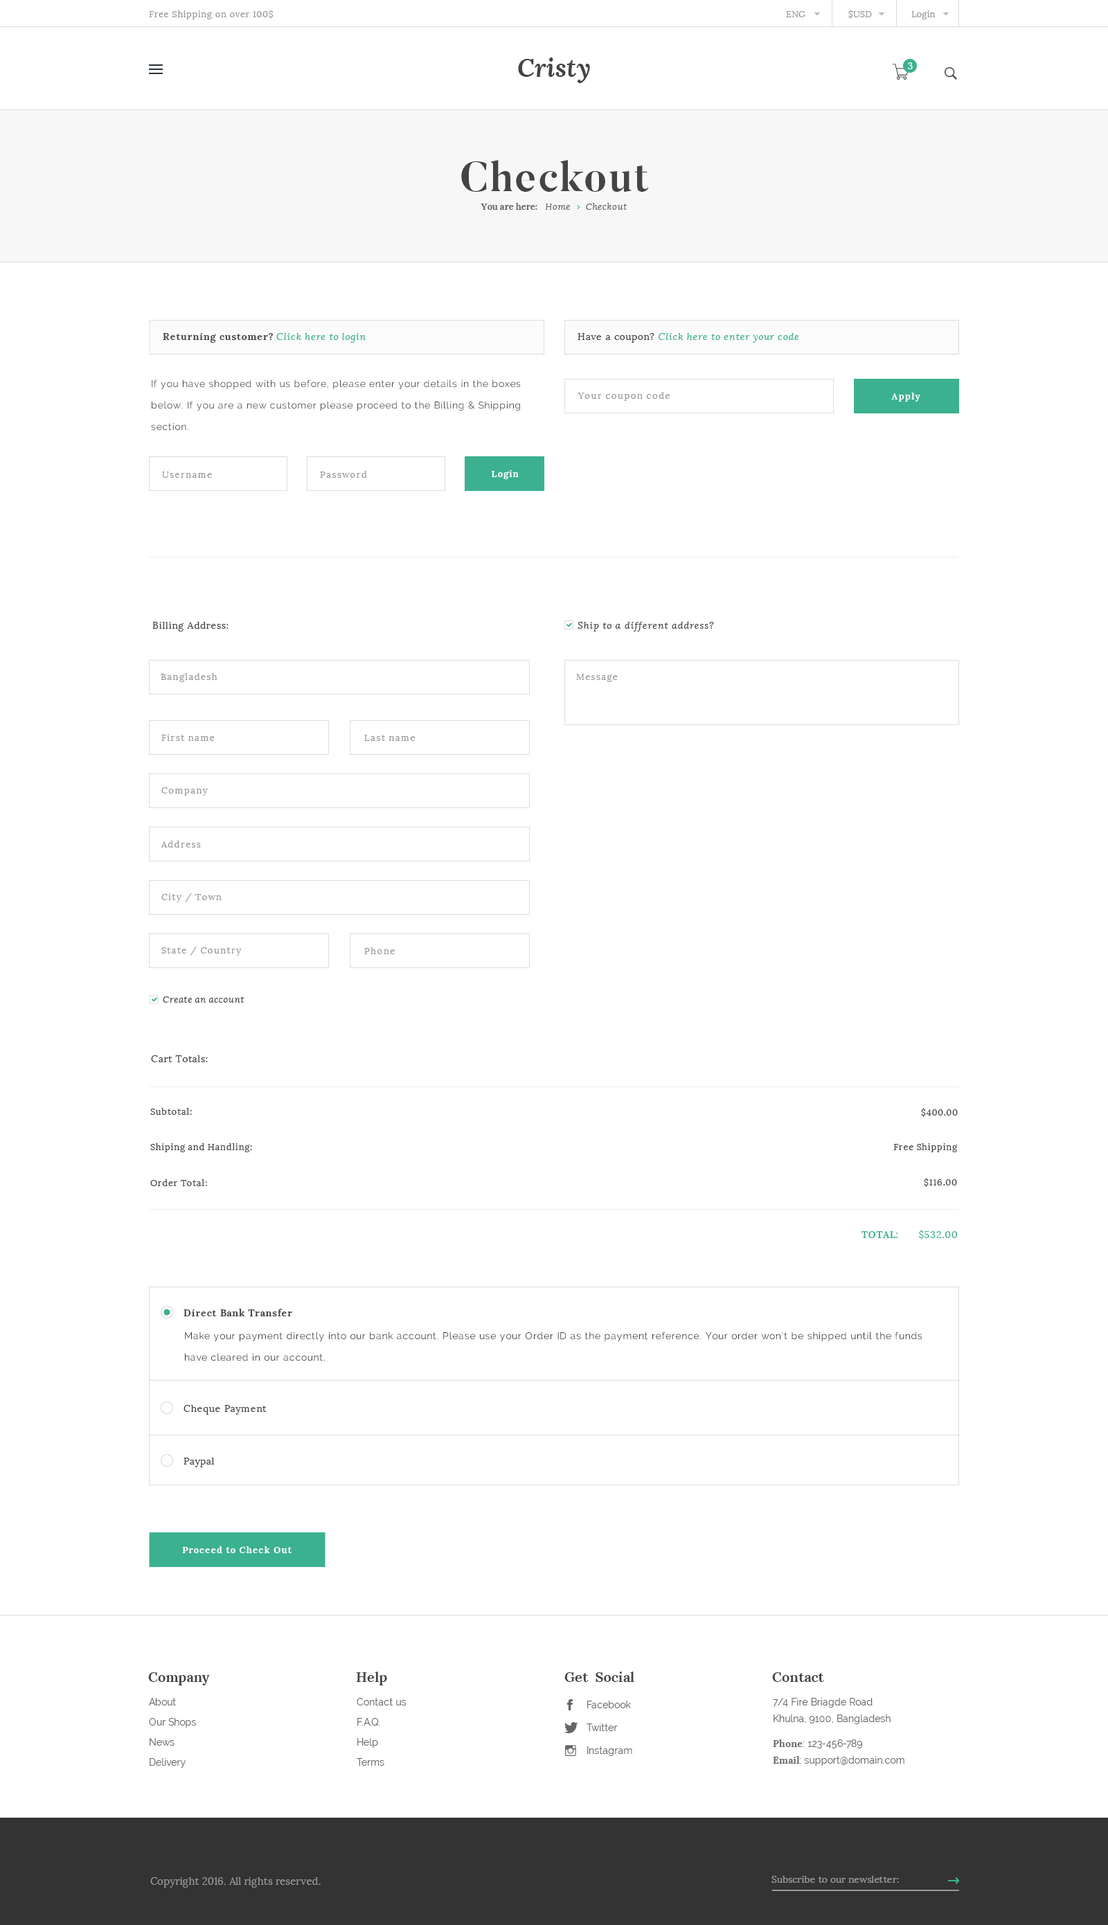
<style>
.page{position:relative;width:1108px;height:1925px;background:#ffffff}
.page>*{position:absolute;margin:0}
.t1{font:9px "Lora-Regular";letter-spacing:0.05em;color:#999999}
.t2{font:9px "Lora-Regular";letter-spacing:0.005em;color:#999999}
.t3{font:24.9px "Lora-BoldItalic";letter-spacing:0.01em;color:#444444}
.t4{font:9.7px "Lora-Regular";letter-spacing:0.1em;color:#ffffff}
.t5{font:41.5px "Butler-Bold";letter-spacing:0.05em;color:#444444}
.t6{font:9px "Lora-Italic";letter-spacing:0.05em;color:#666666}
.t7{font:9px "Lora-Bold";color:#666666}
.t8{font:9px "Lora-Bold";letter-spacing:0.05em;color:#666666}
.t9{font:9.7px "Lora-Bold";letter-spacing:0.05em;color:#444444}
.t10{font:9.7px "Lora-Italic";letter-spacing:0.05em;color:#3bb18f}
.t11{font:9.7px "Lora-Regular";letter-spacing:0.05em;color:#444444}
.t12{font:9.7px/21.3px "Raleway-Regular";letter-spacing:0.05em;color:#444444}
.t13{font:9px "Lora-Regular";letter-spacing:0.1em;color:#999999}
.t14{font:9px "Lora-Bold";letter-spacing:0.1em;color:#ffffff}
.t15{font:9.7px "Lora-Italic";letter-spacing:0.05em;color:#444444}
.t16{font:9px "Lora-Italic";letter-spacing:0.05em;color:#444444}
.t17{font:9px "Lora-Regular";letter-spacing:0.05em;color:#444444}
.t18{font:9.7px "Lora-Regular";letter-spacing:0.05em;color:#3bb18f}
.t19{font:9.7px "Lora-Bold";letter-spacing:0.05em;color:#3bb18f}
.t20{font:9.7px/21.3px "Raleway-Regular";letter-spacing:0.05em;color:#333333}
.t21{font:13.8px "Lora-Bold";letter-spacing:0.005em;color:#444444}
.t22{font:9.7px/20.1px "Raleway-Regular";letter-spacing:0.005em;color:#666666}
.t23{font:9.7px/16.6px "Raleway-Regular";letter-spacing:0.005em;color:#666666}
.t24{font:9.7px/12.5px "Lora-Bold";letter-spacing:0.005em;color:#666666}
.t25{font:9.7px/12.5px "Raleway-Regular";letter-spacing:0.005em;color:#666666}
.t26{font:9.7px/16.6px "Lora-Bold";letter-spacing:0.005em;color:#666666}
.t27{font:9.7px/22.8px "Raleway-Regular";letter-spacing:0.005em;color:#666666}
.t28{font:10.4px "Lora-Regular";letter-spacing:0.005em;color:#999999}
.t29{font:9.7px "Lora-Regular";letter-spacing:0.005em;color:#999999}
</style>
<div class="page">
<p class="t1" style="left:149px;top:10px;width:124px;height:9px">Free Shipping on over 100$</p>
<p class="t2" style="left:786px;top:11px;width:19px;height:6px">ENG</p>
<p class="t2" style="left:848px;top:10px;width:24px;height:9px">$USD</p>
<p class="t2" style="left:911px;top:10px;width:24px;height:9px">Login</p>
<p class="t3" style="left:518px;top:57px;width:72px;height:26px">Cristy</p>
<p class="t4" style="left:908px;top:62px;width:4px;height:7px">3</p>
<p class="t5" style="left:461px;top:160px;width:188px;height:32px">Checkout</p>
<p class="t6" style="left:480px;top:203px;width:147px;height:7px"><span class="t7">You are here</span><span class="t8">:   </span>Home      Checkout</p>
<p class="t9" style="left:163px;top:333px;width:203px;height:10px">Returning customer? <span class="t10">Click here to login</span></p>
<p class="t10" style="left:577px;top:333px;width:222px;height:10px"><span class="t11">Have a coupon? </span>Click here to enter your code</p>
<p class="t12" style="left:151px;top:379px;width:370px;height:52px">If you have shopped with us before, please enter your details in the boxes below. If you are a new customer please proceed to the Billing &amp; Shipping section.</p>
<p class="t13" style="left:577px;top:392px;width:93px;height:9px">Your coupon code</p>
<p class="t14" style="left:891px;top:393px;width:29px;height:9px">Apply</p>
<p class="t13" style="left:162px;top:471px;width:50px;height:7px">Username</p>
<p class="t13" style="left:320px;top:471px;width:47px;height:7px">Password</p>
<p class="t14" style="left:492px;top:470px;width:27px;height:9px">Login</p>
<p class="t11" style="left:152px;top:622px;width:76px;height:9px">Billing Address:</p>
<p class="t15" style="left:577px;top:622px;width:137px;height:9px">Ship to a different address?</p>
<p class="t13" style="left:161px;top:673px;width:56px;height:9px">Bangladesh</p>
<p class="t13" style="left:576px;top:674px;width:42px;height:8px">Message</p>
<p class="t13" style="left:161px;top:734px;width:54px;height:7px">First name</p>
<p class="t13" style="left:364px;top:735px;width:51px;height:6px">Last name</p>
<p class="t13" style="left:161px;top:787px;width:47px;height:8px">Company</p>
<p class="t13" style="left:161px;top:840px;width:40px;height:7px">Address</p>
<p class="t13" style="left:161px;top:893px;width:61px;height:9px">City / Town</p>
<p class="t13" style="left:161px;top:946px;width:81px;height:9px">State / Country</p>
<p class="t13" style="left:364px;top:947px;width:31px;height:7px">Phone</p>
<p class="t16" style="left:163px;top:996px;width:81px;height:6px">Create an account</p>
<p class="t11" style="left:151px;top:1055px;width:57px;height:7px">Cart Totals:</p>
<p class="t17" style="left:150px;top:1108px;width:42px;height:7px">Subtotal:</p>
<p class="t17" style="left:921px;top:1108px;width:36px;height:9px">$400.00</p>
<p class="t17" style="left:150px;top:1143px;width:102px;height:9px">Shiping and Handling:</p>
<p class="t17" style="left:893px;top:1143px;width:64px;height:9px">Free Shipping</p>
<p class="t17" style="left:150px;top:1179px;width:57px;height:7px">Order Total:</p>
<p class="t17" style="left:924px;top:1178px;width:33px;height:9px">$116.00</p>
<p class="t18" style="left:919px;top:1230px;width:38px;height:9px">$532.00</p>
<p class="t19" style="left:861px;top:1231px;width:37px;height:7px">TOTAL:</p>
<p class="t9" style="left:183px;top:1308px;width:109px;height:8px">Direct Bank Transfer</p>
<p class="t20" style="left:185px;top:1331px;width:737px;height:30px">Make your payment directly into our bank account. Please use your Order ID as the payment reference. Your order won’t be shipped until the funds have cleared in our account.</p>
<p class="t11" style="left:183px;top:1405px;width:84px;height:9px">Cheque Payment</p>
<p class="t11" style="left:183px;top:1457px;width:31px;height:10px">Paypal</p>
<p class="t14" style="left:182px;top:1546px;width:110px;height:7px">Proceed to Check Out</p>
<p class="t21" style="left:148px;top:1672px;width:62px;height:13px">Company</p>
<p class="t21" style="left:357px;top:1671px;width:30px;height:14px">Help</p>
<p class="t21" style="left:564px;top:1671px;width:70px;height:11px">Get  Social</p>
<p class="t21" style="left:772px;top:1672px;width:52px;height:10px">Contact</p>
<p class="t22" style="left:149px;top:1698px;width:47px;height:69px">About<br>Our Shops<br>News<br>Delivery<br>Returns</p>
<p class="t22" style="left:357px;top:1698px;width:49px;height:67px">Contact us<br>F.A.Q.<br>Help<br>Terms</p>
<p class="t23" style="left:773px;top:1698px;width:131px;height:67px">7/4 Fire Briagde Road<br>Khulna, 9100, Bangladesh<br><br><span class="t24">Phone</span><span class="t25">: 123-456-789<br></span><span class="t26">Email</span>: support@domain.com</p>
<p class="t27" style="left:586px;top:1700px;width:46px;height:56px">Facebook<br>Twitter<br>Instagram</p>
<p class="t28" style="left:150px;top:1877px;width:171px;height:10px">Copyright 2016. All rights reserved.</p>
<p class="t29" style="left:771px;top:1875px;width:128px;height:7px">Subscribe to our newsletter:</p>
</div>
